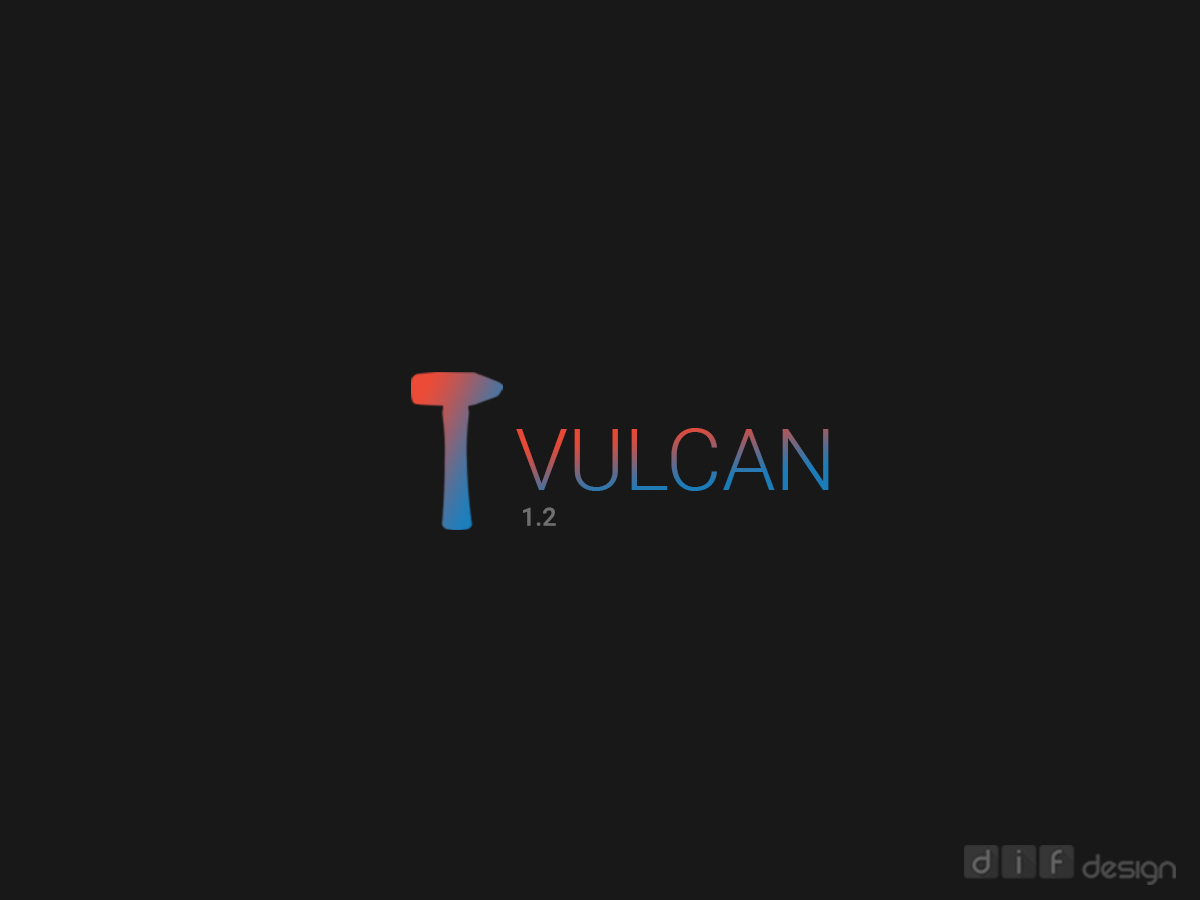
<style>
.page{position:relative;width:1200px;height:900px;background:#181818}
.page>*{position:absolute;margin:0}
.t1{font:85.5px "Roboto-Light"}
.t2{font:25px "Roboto-Medium";color:#6f6f6f}
</style>
<div class="page">
<p class="t1" style="left:516px;top:428px;width:313px;height:63px">VULCAN</p>
<p class="t2" style="left:523px;top:507px;width:33px;height:19px">1.2</p>
</div>
